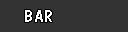
<style>
.page{position:relative;width:128px;height:32px;background:#333333}
.page>*{position:absolute;margin:0}
.t1{font:17.2px "DomCasualBT-Regular";letter-spacing:0.05em;color:#ffffff;scale:1.05 1}
</style>
<div class="page">
<p class="t1" style="left:25px;top:10px;width:27px;height:12px">BAR</p>
</div>
